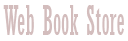
<style>
.page{position:relative;width:128px;height:41px;background:#ffffff}
.page>*{position:absolute;margin:0}
.t1{font:40.2px "Rockwell-Condensed";color:#d3bdbd;scale:0.6 1}
</style>
<div class="page">
<p class="t1" style="left:3px;top:5px;width:121px;height:30px">Web Book Store</p>
</div>
